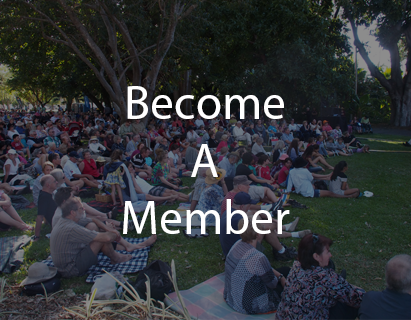
<style>
.page{position:relative;width:411px;height:320px}
.page>*{position:absolute;margin:0}
.t1{font:48px "MyriadPro-Regular";color:#ffffff}
</style>
<div class="page">
<p class="t1" style="left:123px;top:86px;width:167px;height:148px;text-align:center">Become<br>A<br>Member</p>
</div>
